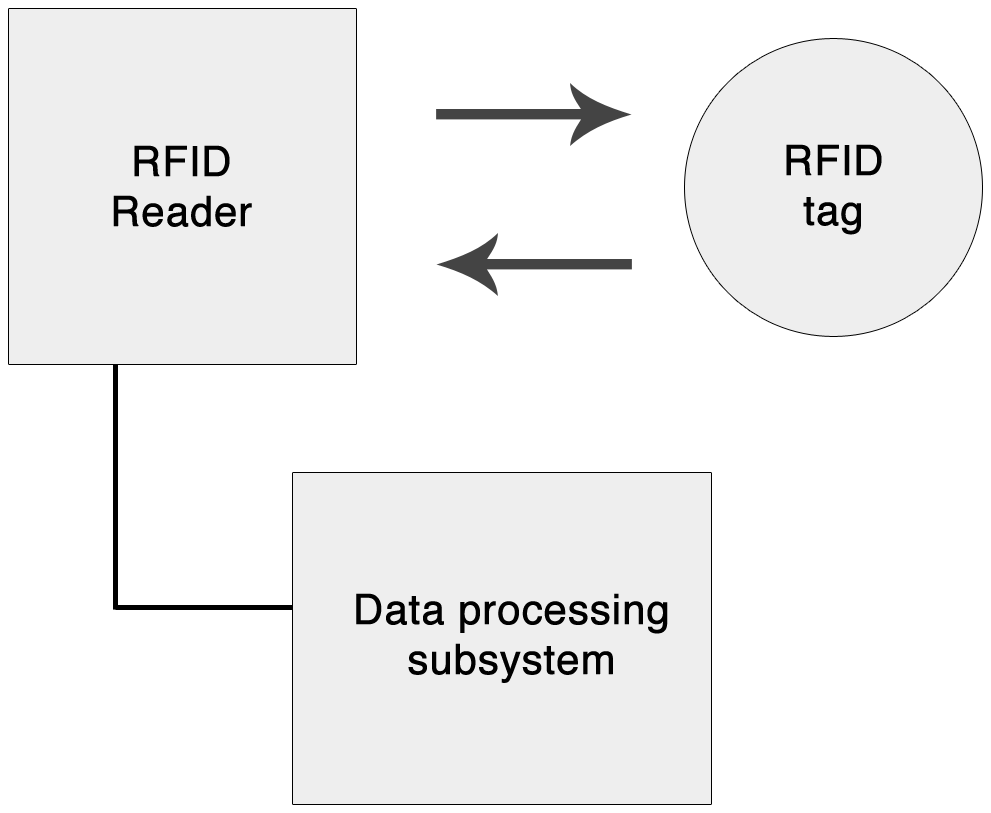
<style>
.page{position:relative;width:991px;height:813px;background:#ffffff}
.page>*{position:absolute;margin:0}
.t1{font:41.6px "Helvetica";color:#000000;font-weight:bold}
</style>
<div class="page">
<p class="t1" style="left:113px;top:145px;width:139px;height:82px;text-align:center">RFID<br>Reader</p>
<p class="t1" style="left:786px;top:144px;width:96px;height:91px;text-align:center">RFID<br>tag</p>
<p class="t1" style="left:356px;top:593px;width:312px;height:90px;text-align:center">Data processing<br>subsystem</p>
</div>
